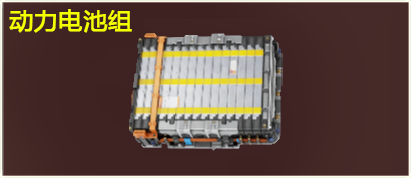
<style>
.page{position:relative;width:411px;height:178px}
.page>*{position:absolute;margin:0}
.t1{font:24px "MicrosoftYaHeiUI";color:#f4ff00;font-weight:bold}
</style>
<div class="page">
<p class="t1" style="left:9px;top:9px;width:123px;height:24px">动力电池组</p>
</div>
